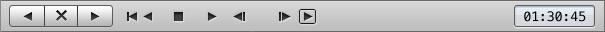
<style>
.page{position:relative;width:605px;height:32px}
.page>*{position:absolute;margin:0}
.t1{font:13px "Menlo-Regular";color:#000000}
</style>
<div class="page">
<p class="t1" style="left:524px;top:11px;width:62px;height:11px">01:30:45</p>
</div>
